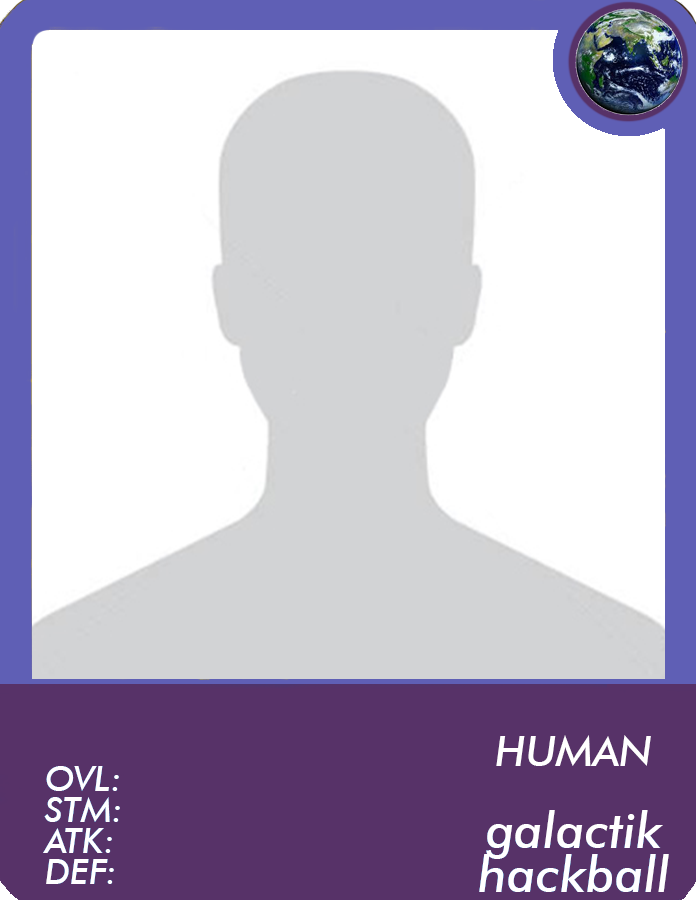
<style>
.page{position:relative;width:696px;height:900px;background:#ffffff}
.page>*{position:absolute;margin:0}
.t1{font:42px "FuturaBT-MediumItalic";color:#ffffff}
.t2{font:35px/31px "FuturaBT-MediumItalic";color:#ffffff}
.t3{font:50.3px/44.7px "FuturaBT-MediumItalic";color:#ffffff}
</style>
<div class="page">
<p class="t1" style="left:496px;top:735px;width:155px;height:31px">HUMAN</p>
<p class="t2" style="left:43px;top:766px;width:77px;height:118px">OVL:<br>STM:<br>ATK:<br>DEF:</p>
<p class="t3" style="left:479px;top:810px;width:190px;height:82px;text-align:center">galactik<br>hackball</p>
</div>
